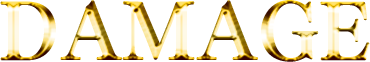
<style>
.page{position:relative;width:370px;height:62px;background:#ffffff}
.page>*{position:absolute;margin:0}
.t1{font:72px "UDMinchoPr6N-B"}
</style>
<div class="page">
<p class="t1" style="left:0px;top:0px;width:370px;height:62px">DAMAGE</p>
</div>
